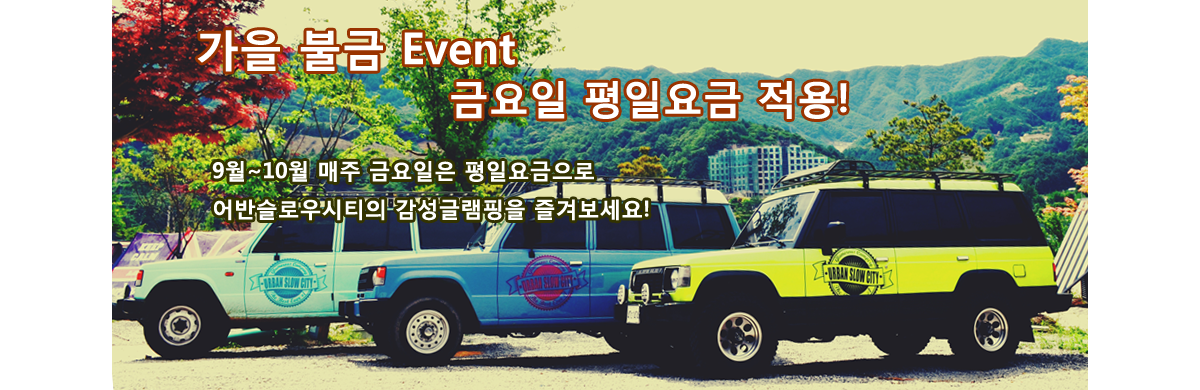
<style>
.page{position:relative;width:1200px;height:390px;background:#ffffff}
.page>*{position:absolute;margin:0}
.t1{font:43.8px "MalgunGothicBold";color:#ffffff}
.t2{font:40px "MalgunGothicBold";color:#ffffff}
.t3{font:21.9px "MalgunGothicBold";color:#ffffff}
</style>
<div class="page">
<p class="t1" style="left:197px;top:30px;width:318px;height:42px">가을 불금 Event</p>
<p class="t2" style="left:451px;top:81px;width:396px;height:38px">금요일 평일요금 적용!</p>
<p class="t3" style="left:212px;top:161px;width:437px;height:60px">9월~10월 매주 금요일은 평일요금으로<br>어반슬로우시티의 감성글램핑을 즐겨보세요!</p>
</div>
